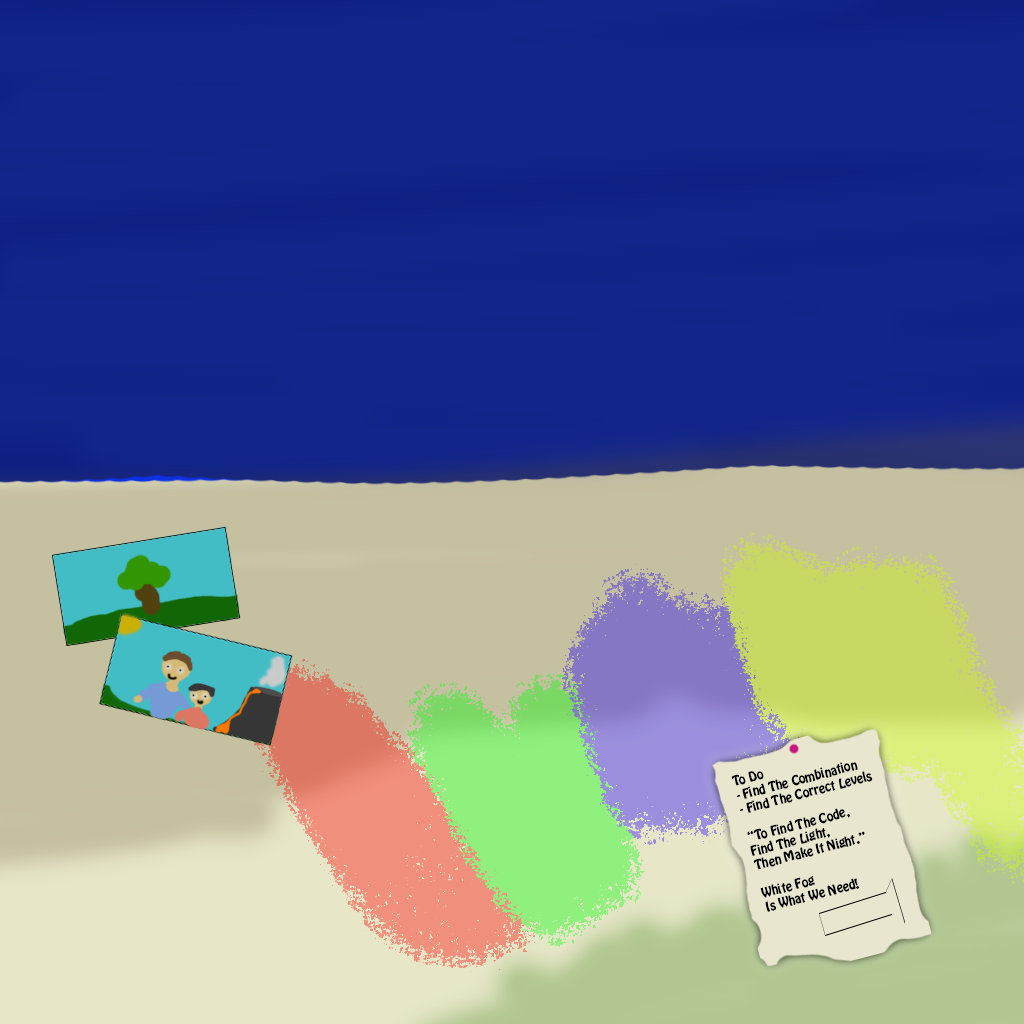
<style>
.page{position:relative;width:1024px;height:1024px;background:#12258a}
.page>*{position:absolute;margin:0}
.t1{font:12px "HoboStd";color:#000000}
</style>
<div class="page">
<p class="t1" style="left:731px;top:762px;width:142px;height:150px;rotate:-15deg">To Do <br>- Find The Combination<br>- Find The Correct Levels<br><br>“To Find The Code,<br>Find The Light,<br>Then Make It Night.”<br><br>White Fog<br>Is What We Need!</p>
</div>
